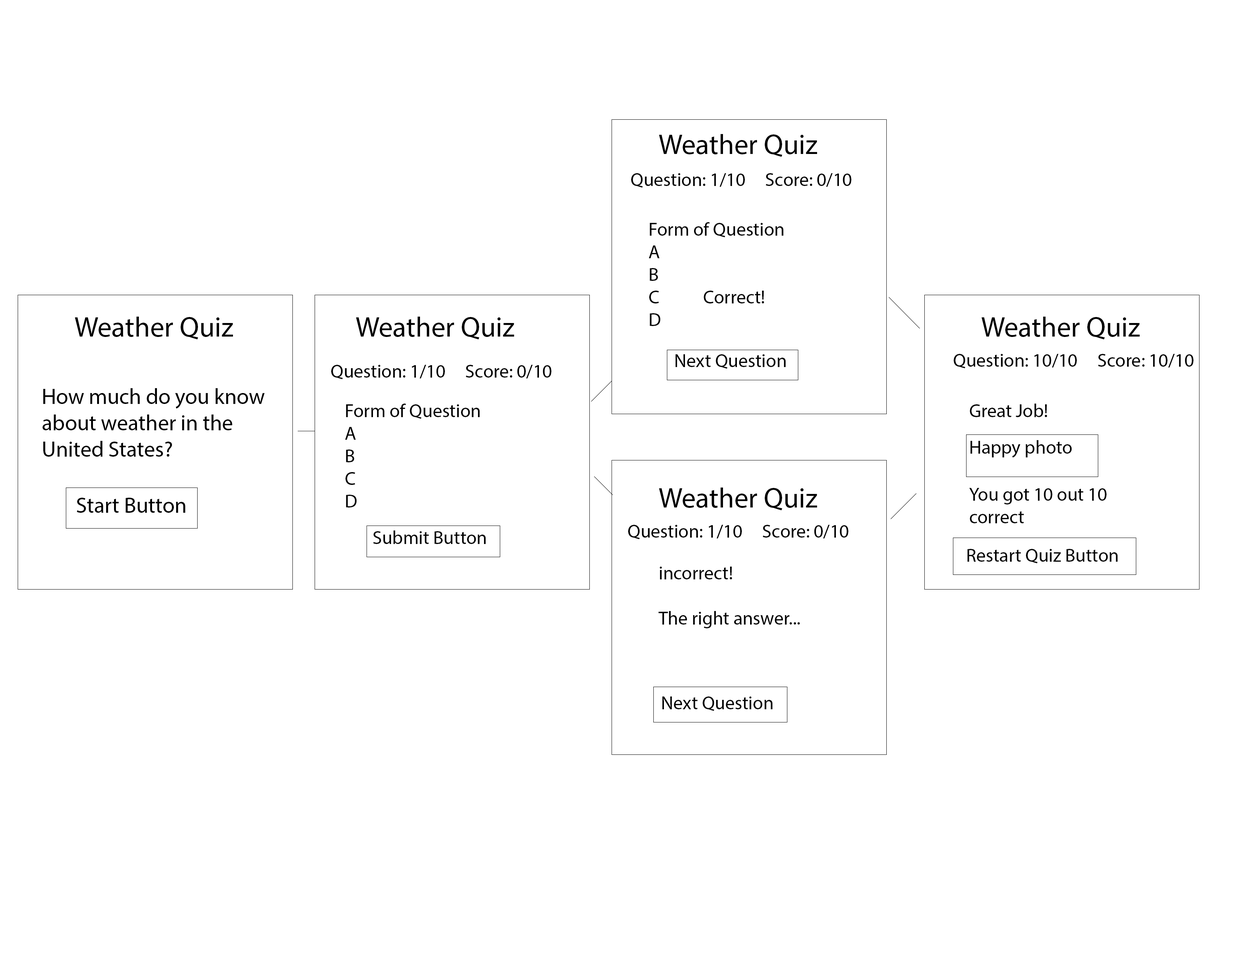
<style>
.page{position:relative;width:1242px;height:960px;background:#ffffff}
.page>*{position:absolute;margin:0}
.t1{font:28.2px "MyriadPro-Regular";color:#000000}
.t2{font:18.8px "MyriadPro-Regular";color:#000000}
.t3{font:22px "MyriadPro-Regular";color:#000000}
</style>
<div class="page">
<p class="t1" style="left:659px;top:134px;width:158px;height:23px">Weather Quiz</p>
<p class="t2" style="left:631px;top:173px;width:220px;height:15px">Question: 1/10     Score: 0/10</p>
<p class="t2" style="left:649px;top:222px;width:135px;height:104px">Form of Question<br>A<br>B<br>C           Correct!<br>D</p>
<p class="t1" style="left:75px;top:317px;width:158px;height:23px">Weather Quiz</p>
<p class="t1" style="left:356px;top:317px;width:158px;height:23px">Weather Quiz</p>
<p class="t1" style="left:982px;top:317px;width:158px;height:23px">Weather Quiz</p>
<p class="t2" style="left:954px;top:354px;width:240px;height:15px">Question: 10/10     Score: 10/10</p>
<p class="t2" style="left:331px;top:365px;width:220px;height:14px">Question: 1/10     Score: 0/10</p>
<p class="t2" style="left:676px;top:354px;width:110px;height:15px">Next Question</p>
<p class="t3" style="left:43px;top:388px;width:222px;height:69px">How much do you know about weather in the United States?</p>
<p class="t2" style="left:345px;top:404px;width:135px;height:103px">Form of Question<br>A<br>B<br>C<br>D</p>
<p class="t2" style="left:970px;top:404px;width:77px;height:13px">Great Job!</p>
<p class="t2" style="left:970px;top:440px;width:102px;height:18px">Happy photo</p>
<p class="t3" style="left:77px;top:498px;width:109px;height:15px">Start Button</p>
<p class="t1" style="left:659px;top:487px;width:158px;height:23px">Weather Quiz</p>
<p class="t2" style="left:969px;top:488px;width:138px;height:35px">You got 10 out 10 correct</p>
<p class="t2" style="left:373px;top:530px;width:113px;height:14px">Submit Button</p>
<p class="t2" style="left:628px;top:525px;width:220px;height:14px">Question: 1/10     Score: 0/10</p>
<p class="t2" style="left:967px;top:549px;width:151px;height:15px">Restart Quiz Button</p>
<p class="t2" style="left:658px;top:567px;width:142px;height:61px">incorrect!<br><br>The right answer...</p>
<p class="t2" style="left:663px;top:696px;width:110px;height:15px">Next Question</p>
</div>
